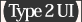
<style>
.page{position:relative;width:82px;height:22px;background:#333333}
.page>*{position:absolute;margin:0}
.t1{font:18px "HeiseiMinStd-W7";letter-spacing:-0.08em;color:#ffffff}
</style>
<div class="page">
<p class="t1" style="left:8px;top:4px;width:66px;height:18px">Type 2 UI</p>
</div>
